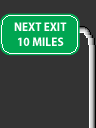
<style>
.page{position:relative;width:96px;height:128px;background:#333333}
.page>*{position:absolute;margin:0}
.t1{font:12.5px "MyriadPro-BoldSemiCn";color:#ffffff}
</style>
<div class="page">
<p class="t1" style="left:14px;top:22px;width:53px;height:24px;text-align:center">NEXT EXIT<br>10 MILES</p>
</div>
